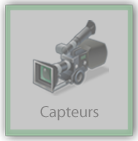
<style>
.page{position:relative;width:138px;height:141px;background:#c7c7c7}
.page>*{position:absolute;margin:0}
.t1{font:15.9px "MyriadPro-Regular";color:#868585}
</style>
<div class="page">
<p class="t1" style="left:40px;top:106px;width:59px;height:15px">Capteurs</p>
</div>
